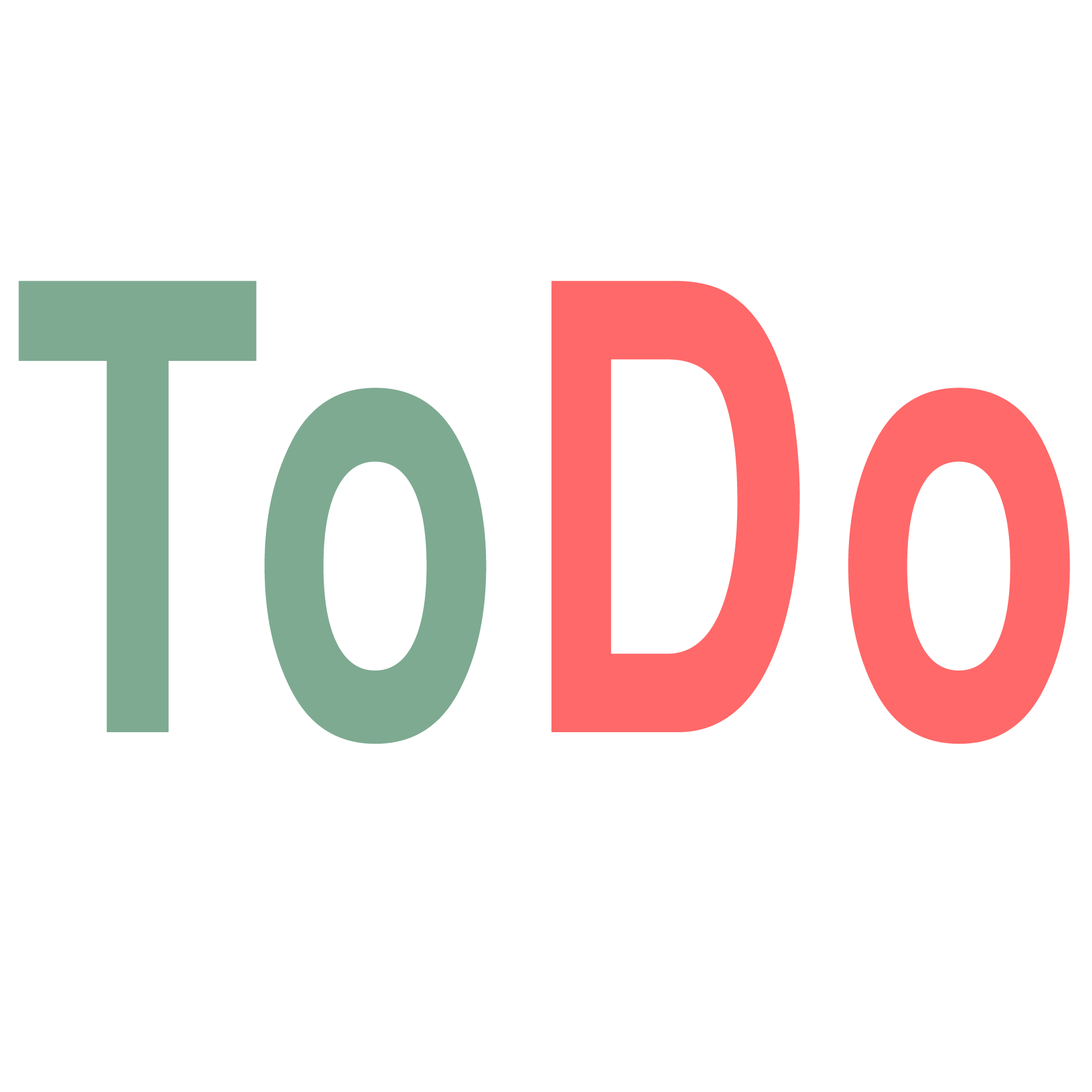
<style>
.page{position:relative;width:1092px;height:1092px;background:#ffffff}
.page>*{position:absolute;margin:0}
.t1{font:626.6px "Helvetica-Bold";letter-spacing:0.05em;color:#7eaa92;scale:0.65 1}
.t2{font:626.6px "Helvetica-Bold";letter-spacing:0.05em;color:#ff6969;scale:0.65 1}
</style>
<div class="page">
<p class="t1" style="left:19px;top:281px;width:1051px;height:463px">To<span class="t2">Do</span></p>
</div>
